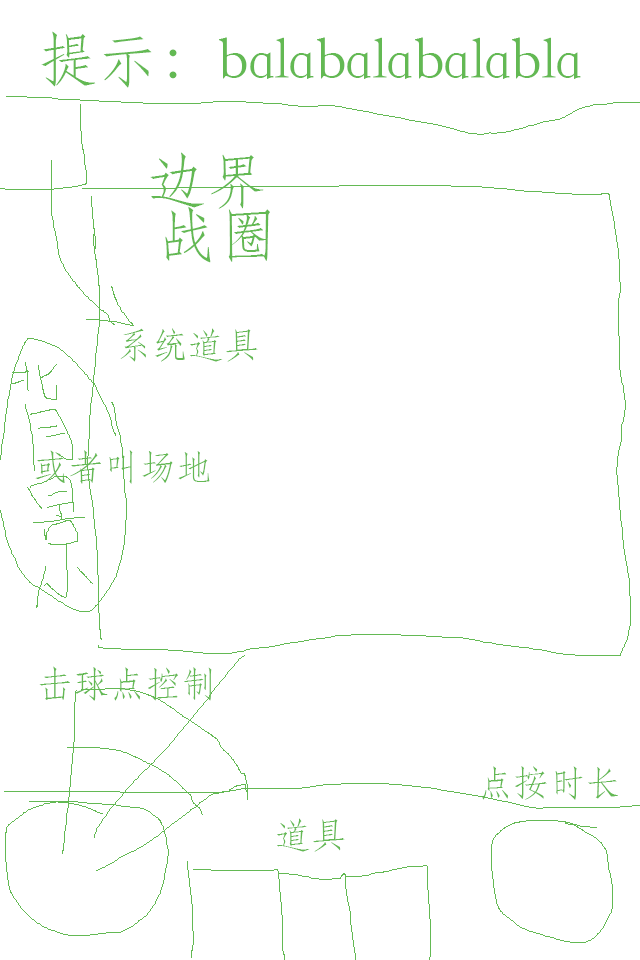
<style>
.page{position:relative;width:640px;height:960px;background:#ffffff}
.page>*{position:absolute;margin:0}
.t1{font:60px "STFangsong";color:#63b953}
.t2{font:36px "STFangsong";color:#63b953}
</style>
<div class="page">
<p class="t1" style="left:41px;top:31px;width:540px;height:57px">提示：balabalabalabla</p>
<p class="t1" style="left:150px;top:152px;width:114px;height:57px">边界</p>
<p class="t1" style="left:165px;top:206px;width:105px;height:57px">战圈</p>
<p class="t2" style="left:120px;top:328px;width:138px;height:34px">系统道具</p>
<p class="t2" style="left:35px;top:450px;width:175px;height:34px">或者叫场地</p>
<p class="t2" style="left:39px;top:666px;width:173px;height:35px">击球点控制</p>
<p class="t2" style="left:482px;top:766px;width:136px;height:34px">点按时长</p>
<p class="t2" style="left:277px;top:818px;width:68px;height:34px">道具</p>
</div>
